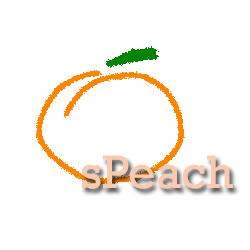
<style>
.page{position:relative;width:250px;height:250px;background:#ffffff}
.page>*{position:absolute;margin:0}
.t1{font:48px "Rockwell";color:#fbc9ad}
</style>
<div class="page">
<p class="t1" style="left:82px;top:155px;width:151px;height:34px">sPeach</p>
</div>
